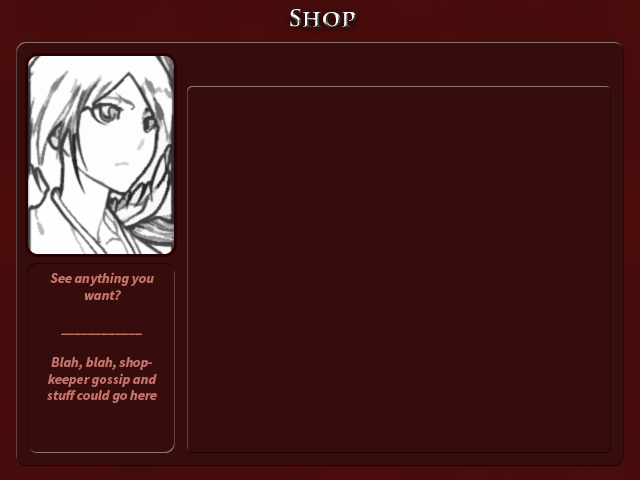
<style>
.page{position:relative;width:640px;height:480px;background:#370c0c}
.page>*{position:absolute;margin:0}
.t1{font:22.8px "TrajanPro3-Bold"}
.t2{font:14px "SourceSansPro-BoldIt";color:#c6746a}
</style>
<div class="page">
<p class="t1" style="left:290px;top:9px;width:66px;height:18px">Shop</p>
<p class="t2" style="left:47px;top:272px;width:110px;height:131px;text-align:center">See anything you want?<br><br>____________<br><br>Blah, blah, shopkeeper gossip and stuff could go here</p>
</div>
